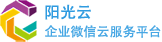
<style>
.page{position:relative;width:162px;height:42px;background:#ffffff}
.page>*{position:absolute;margin:0}
.t1{font:16px "AdobeHeitiStd-Regular";letter-spacing:0.001em;color:#2f9be0}
.t2{font:13px "AdobeHeitiStd-Regular";letter-spacing:0.001em;color:#48a7e4}
</style>
<div class="page">
<p class="t1" style="left:45px;top:4px;width:46px;height:16px">阳光云</p>
<p class="t2" style="left:45px;top:25px;width:116px;height:13px">企业微信云服务平台</p>
</div>
